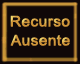
<style>
.page{position:relative;width:80px;height:64px;background:#100808}
.page>*{position:absolute;margin:0}
.t1{font:14.5px "ArialMT";letter-spacing:0.009em;color:#ce9439;font-weight:bold;scale:1.05 1}
</style>
<div class="page">
<p class="t1" style="left:10px;top:15px;width:60px;height:12px">Recurso</p>
<p class="t1" style="left:10px;top:34px;width:60px;height:12px">Ausente</p>
</div>
